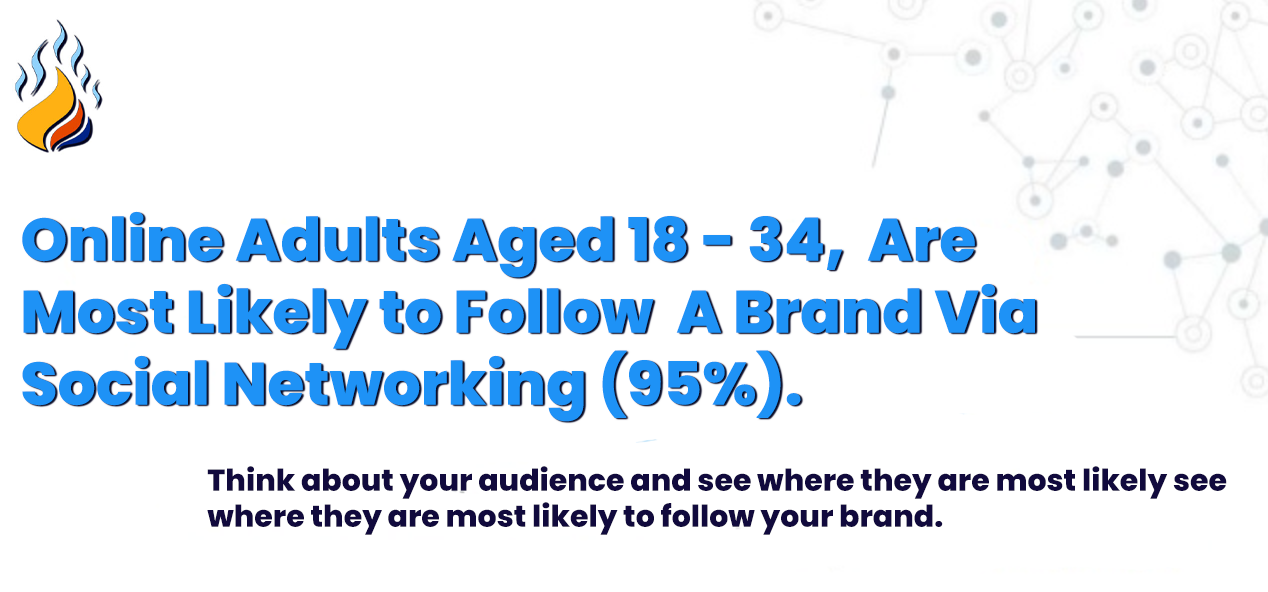
<style>
.page{position:relative;width:1268px;height:592px;background:#ffffff}
.page>*{position:absolute;margin:0}
.t1{font:60px/72px "Poppins-ExtraBold";color:#1e92f6}
.t2{font:60px/20.7px "Poppins-ExtraBold";color:#1e92f6}
.t3{font:30px/36px "Poppins-ExtraBold";color:#110a3d}
</style>
<div class="page">
<p class="t1" style="left:22px;top:211px;width:1013px;height:211px"><span class="t2">Online Adults Aged 18 - 34,  </span>Are Most Likely to Follow  A Brand Via Social Networking (95%).</p>
<p class="t3" style="left:207px;top:466px;width:1020px;height:69px">Think about your audience and see where they are most likely see where they are most likely to follow your brand.</p>
</div>
